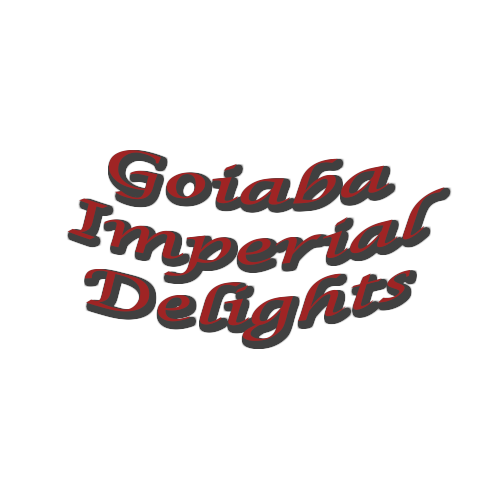
<style>
.page{position:relative;width:500px;height:500px;background:#ffffff}
.page>*{position:absolute;margin:0}
.t1{font:59.1px "LucidaCalligraphy-Italic";color:#9f2424}
</style>
<div class="page">
<p class="t1" style="left:67px;top:150px;width:378px;height:191px;text-align:center">Goiaba Imperial Delights</p>
</div>
